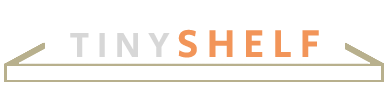
<style>
.page{position:relative;width:390px;height:90px;background:#ffffff}
.page>*{position:absolute;margin:0}
.t1{font:40px "SecularOne-Regular";letter-spacing:0.2em;color:#f29559}
.t2{font:36px "SecularOne-Regular";letter-spacing:0.2em;color:#d7d7d7}
</style>
<div class="page">
<p class="t1" style="left:70px;top:29px;width:249px;height:29px"><span class="t2">TINY</span>SHELF</p>
</div>
